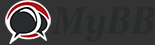
<style>
.page{position:relative;width:155px;height:45px;background:#333333}
.page>*{position:absolute;margin:0}
.t1{font:37.9px "Georgia-BoldItalic";color:#282c2d;scale:0.84 1}
</style>
<div class="page">
<p class="t1" style="left:50px;top:7px;width:105px;height:35px">MyBB</p>
</div>
